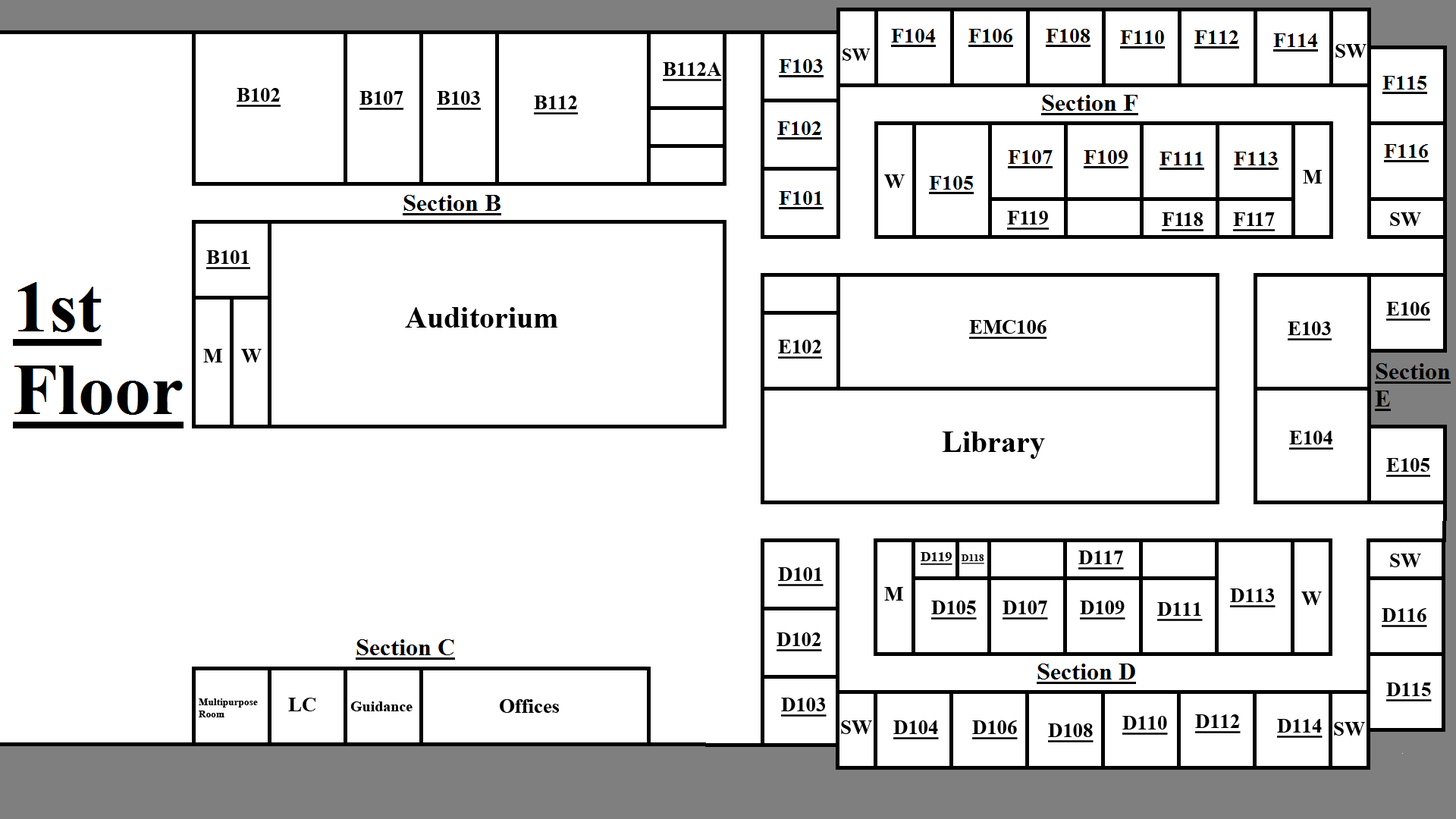
<style>
.page{position:relative;width:1456px;height:819px;background:#ffffff}
.page>*{position:absolute;margin:0}
.t1{font:18.2px "TimesNewRomanPS-BoldMT";color:#000000}
.t2{font:20.2px "TimesNewRomanPS-BoldMT";color:#000000}
.t3{font:20.2px "TimesNewRomanPS-BoldMT";color:#000000;text-decoration:underline}
.t4{font:30.3px "TimesNewRomanPS-BoldMT";color:#000000}
.t5{font:14.2px "TimesNewRomanPS-BoldMT";color:#000000;text-decoration:underline}
.t6{font:10.1px "TimesNewRomanPS-BoldMT";color:#000000;text-decoration:underline}
.t7{font:10.1px "TimesNewRomanPS-BoldMT";color:#000000}
.t8{font:15.2px "TimesNewRomanPS-BoldMT";color:#000000}
</style>
<div class="page">
<p class="t1" style="left:842px;top:49px;width:29px;height:12px">SW</p>
<p class="t2" style="left:1335px;top:44px;width:31px;height:14px">SW</p>
<p class="t3" style="left:663px;top:62px;width:59px;height:19px">B112A</p>
<p class="t3" style="left:237px;top:88px;width:44px;height:19px">B102</p>
<p class="t3" style="left:359px;top:91px;width:44px;height:19px">B107</p>
<p class="t3" style="left:437px;top:91px;width:44px;height:19px">B103</p>
<p class="t3" style="left:534px;top:96px;width:44px;height:19px">B112</p>
<p class="t2" style="left:1303px;top:170px;width:19px;height:14px">M</p>
<p class="t2" style="left:884px;top:174px;width:21px;height:14px">W</p>
<p class="t3" style="left:1007px;top:211px;width:42px;height:19px">F119</p>
<p class="t3" style="left:1162px;top:212px;width:41px;height:19px">F118</p>
<p class="t3" style="left:1233px;top:212px;width:42px;height:19px">F117</p>
<p class="t2" style="left:1390px;top:212px;width:31px;height:14px">SW</p>
<p class="t3" style="left:206px;top:250px;width:44px;height:19px">B101</p>
<p class="t3" style="left:1386px;top:302px;width:44px;height:19px">E106</p>
<p class="t4" style="left:405px;top:307px;width:153px;height:21px">Auditorium</p>
<p class="t3" style="left:969px;top:320px;width:78px;height:19px">EMC106</p>
<p class="t3" style="left:1288px;top:322px;width:44px;height:18px">E103</p>
<p class="t3" style="left:778px;top:340px;width:44px;height:19px">E102</p>
<p class="t2" style="left:203px;top:349px;width:19px;height:13px">M</p>
<p class="t2" style="left:241px;top:349px;width:21px;height:13px">W</p>
<p class="t4" style="left:942px;top:431px;width:103px;height:28px">Library</p>
<p class="t3" style="left:1289px;top:431px;width:44px;height:19px">E104</p>
<p class="t3" style="left:1386px;top:458px;width:44px;height:19px">E105</p>
<p class="t5" style="left:921px;top:552px;width:31px;height:13px">D119</p>
<p class="t6" style="left:962px;top:554px;width:22px;height:10px">D118</p>
<p class="t3" style="left:1078px;top:551px;width:46px;height:19px">D117</p>
<p class="t2" style="left:1390px;top:554px;width:31px;height:13px">SW</p>
<p class="t3" style="left:778px;top:567px;width:46px;height:19px">D101</p>
<p class="t2" style="left:884px;top:587px;width:19px;height:14px">M</p>
<p class="t3" style="left:1230px;top:588px;width:45px;height:19px">D113</p>
<p class="t2" style="left:1301px;top:591px;width:21px;height:14px">W</p>
<p class="t3" style="left:931px;top:601px;width:46px;height:19px">D105</p>
<p class="t3" style="left:1003px;top:601px;width:45px;height:19px">D107</p>
<p class="t3" style="left:1080px;top:601px;width:45px;height:19px">D109</p>
<p class="t3" style="left:1157px;top:602px;width:46px;height:19px">D111</p>
<p class="t3" style="left:1382px;top:608px;width:45px;height:19px">D116</p>
<p class="t3" style="left:777px;top:632px;width:45px;height:19px">D102</p>
<p class="t3" style="left:1386px;top:682px;width:46px;height:19px">D115</p>
<p class="t7" style="left:199px;top:698px;width:59px;height:19px">Multipurpose <br>Room</p>
<p class="t2" style="left:288px;top:698px;width:27px;height:13px">LC</p>
<p class="t8" style="left:350px;top:701px;width:63px;height:10px">Guidance</p>
<p class="t2" style="left:500px;top:699px;width:60px;height:14px">Offices</p>
<p class="t3" style="left:781px;top:698px;width:46px;height:19px">D103</p>
<p class="t2" style="left:841px;top:720px;width:31px;height:14px">SW</p>
<p class="t3" style="left:893px;top:720px;width:46px;height:19px">D104</p>
<p class="t3" style="left:972px;top:720px;width:46px;height:19px">D106</p>
<p class="t3" style="left:1048px;top:723px;width:46px;height:19px">D108</p>
<p class="t3" style="left:1122px;top:716px;width:46px;height:19px">D110</p>
<p class="t3" style="left:1195px;top:714px;width:46px;height:19px">D112</p>
<p class="t3" style="left:1277px;top:719px;width:46px;height:19px">D114</p>
<p class="t2" style="left:1334px;top:722px;width:31px;height:14px">SW</p>
</div>
